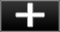
<style>
.page{position:relative;width:60px;height:32px}
.page>*{position:absolute;margin:0}
.t1{font:46.8px "Gotham-Book";color:#ffffff;scale:1.2 1}
</style>
<div class="page">
<p class="t1" style="left:16px;top:3px;width:28px;height:24px">+</p>
</div>
